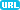
<style>
.page{position:relative;width:20px;height:10px;background:#10bce7}
.page>*{position:absolute;margin:0}
.t1{font:8px "HGSGothicM";color:#ffffff;font-weight:bold}
</style>
<div class="page">
<p class="t1" style="left:2px;top:2px;width:17px;height:6px">URL</p>
</div>
